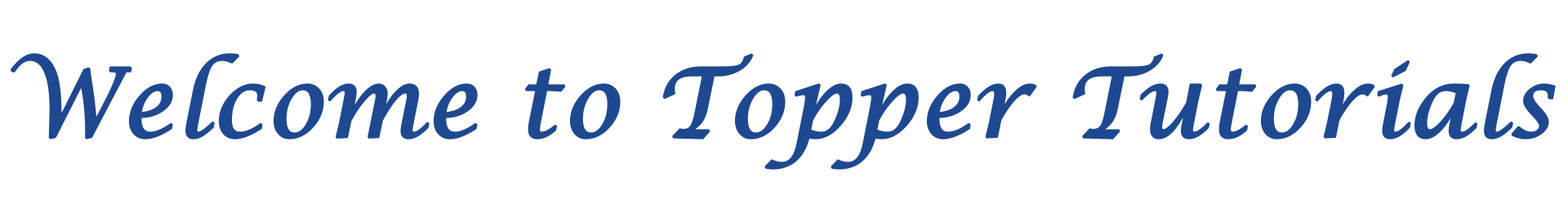
<style>
.page{position:relative;width:1568px;height:204px;background:#ffffff}
.page>*{position:absolute;margin:0}
.t1{font:96.4px "LucidaCalligraphy-Italic";color:#1e4991;font-weight:bold}
</style>
<div class="page">
<p class="t1" style="left:11px;top:53px;width:1545px;height:117px">Welcome to Topper Tutorials</p>
</div>
